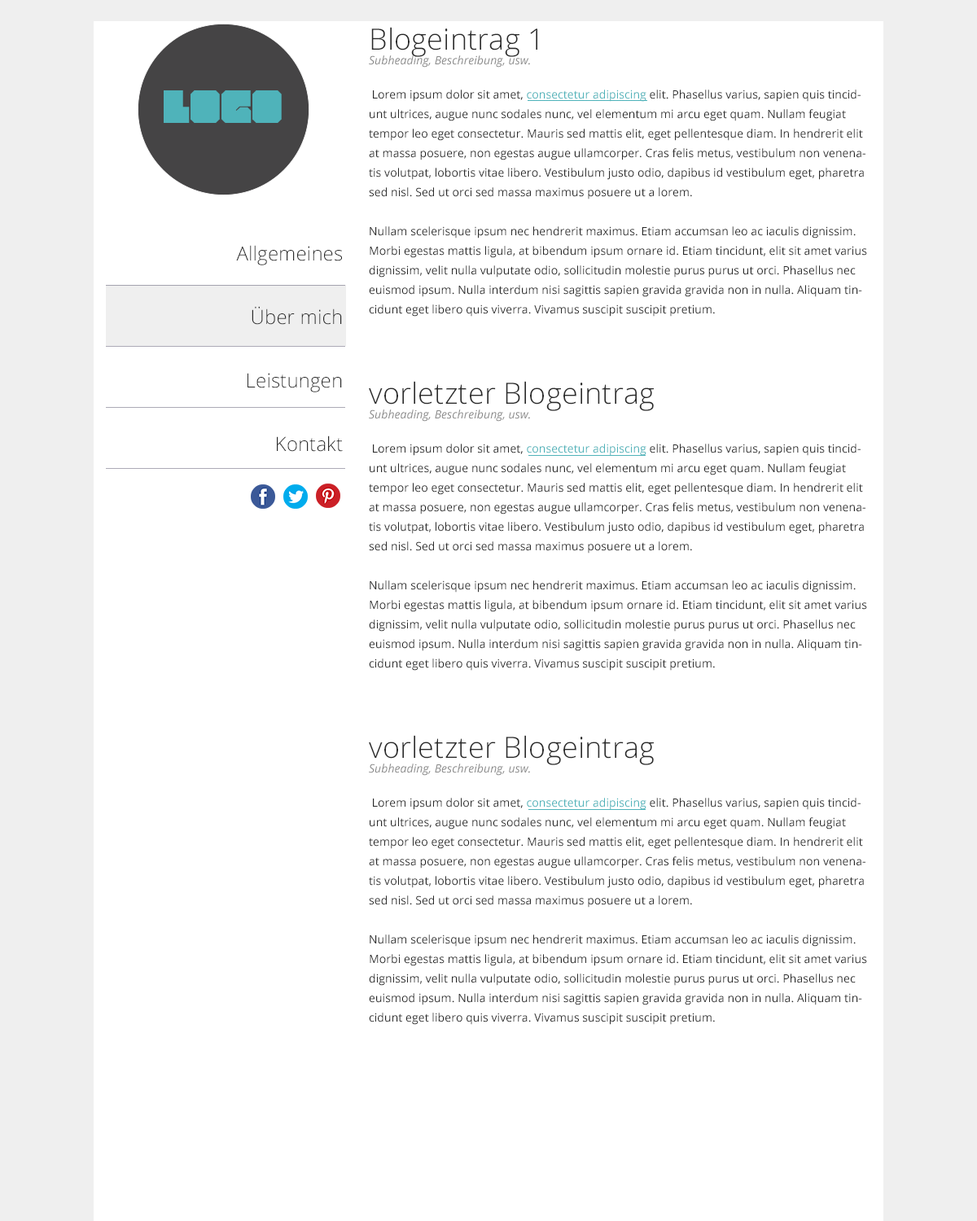
<style>
.page{position:relative;width:977px;height:1221px;background:#ffffff}
.page>*{position:absolute;margin:0}
.t1{font:11.4px/19.5px "OpenSans";letter-spacing:0.005em;color:#2a2a2a}
.t2{font:29.3px/14.7px "OpenSans-Light";letter-spacing:0.005em;color:#2a2a2a}
.t3{font:11.4px/14.7px "OpenSans-Italic";letter-spacing:0.005em;color:#8a8a8a}
.t4{font:11.4px/19.5px "OpenSans";letter-spacing:0.005em;color:#4fb3ba}
.t5{font:19.5px/48.8px "OpenSans-Light";letter-spacing:0.005em;color:#2a2a2a}
</style>
<div class="page">
<p class="t1" style="left:369px;top:27px;width:498px;height:290px"><span class="t2">Blogeintrag 1<br></span><span class="t3">Subheading, Beschreibung, usw.<br><br> </span>Lorem ipsum dolor sit amet, <span class="t4">consectetur adipiscing</span> elit. Phasellus varius, sapien quis tincidunt ultrices, augue nunc sodales nunc, vel elementum mi arcu eget quam. Nullam feugiat tempor leo eget consectetur. Mauris sed mattis elit, eget pellentesque diam. In hendrerit elit at massa posuere, non egestas augue ullamcorper. Cras felis metus, vestibulum non venenatis volutpat, lobortis vitae libero. Vestibulum justo odio, dapibus id vestibulum eget, pharetra sed nisl. Sed ut orci sed massa maximus posuere ut a lorem.<br><br>Nullam scelerisque ipsum nec hendrerit maximus. Etiam accumsan leo ac iaculis dignissim. Morbi egestas mattis ligula, at bibendum ipsum ornare id. Etiam tincidunt, elit sit amet varius dignissim, velit nulla vulputate odio, sollicitudin molestie purus purus ut orci. Phasellus nec euismod ipsum. Nulla interdum nisi sagittis sapien gravida gravida non in nulla. Aliquam tincidunt eget libero quis viverra. Vivamus suscipit suscipit pretium.</p>
<p class="t5" style="left:236px;top:245px;width:107px;height:207px;text-align:right">Allgemeines<br><br>Über mich<br><br>Leistungen<br><br>Kontakt</p>
<p class="t1" style="left:369px;top:381px;width:498px;height:290px"><span class="t2">vorletzter Blogeintrag<br></span><span class="t3">Subheading, Beschreibung, usw.<br><br> </span>Lorem ipsum dolor sit amet, <span class="t4">consectetur adipiscing</span> elit. Phasellus varius, sapien quis tincidunt ultrices, augue nunc sodales nunc, vel elementum mi arcu eget quam. Nullam feugiat tempor leo eget consectetur. Mauris sed mattis elit, eget pellentesque diam. In hendrerit elit at massa posuere, non egestas augue ullamcorper. Cras felis metus, vestibulum non venenatis volutpat, lobortis vitae libero. Vestibulum justo odio, dapibus id vestibulum eget, pharetra sed nisl. Sed ut orci sed massa maximus posuere ut a lorem.<br><br>Nullam scelerisque ipsum nec hendrerit maximus. Etiam accumsan leo ac iaculis dignissim. Morbi egestas mattis ligula, at bibendum ipsum ornare id. Etiam tincidunt, elit sit amet varius dignissim, velit nulla vulputate odio, sollicitudin molestie purus purus ut orci. Phasellus nec euismod ipsum. Nulla interdum nisi sagittis sapien gravida gravida non in nulla. Aliquam tincidunt eget libero quis viverra. Vivamus suscipit suscipit pretium.</p>
<p class="t1" style="left:369px;top:735px;width:498px;height:290px"><span class="t2">vorletzter Blogeintrag<br></span><span class="t3">Subheading, Beschreibung, usw.<br><br> </span>Lorem ipsum dolor sit amet, <span class="t4">consectetur adipiscing</span> elit. Phasellus varius, sapien quis tincidunt ultrices, augue nunc sodales nunc, vel elementum mi arcu eget quam. Nullam feugiat tempor leo eget consectetur. Mauris sed mattis elit, eget pellentesque diam. In hendrerit elit at massa posuere, non egestas augue ullamcorper. Cras felis metus, vestibulum non venenatis volutpat, lobortis vitae libero. Vestibulum justo odio, dapibus id vestibulum eget, pharetra sed nisl. Sed ut orci sed massa maximus posuere ut a lorem.<br><br>Nullam scelerisque ipsum nec hendrerit maximus. Etiam accumsan leo ac iaculis dignissim. Morbi egestas mattis ligula, at bibendum ipsum ornare id. Etiam tincidunt, elit sit amet varius dignissim, velit nulla vulputate odio, sollicitudin molestie purus purus ut orci. Phasellus nec euismod ipsum. Nulla interdum nisi sagittis sapien gravida gravida non in nulla. Aliquam tincidunt eget libero quis viverra. Vivamus suscipit suscipit pretium.</p>
</div>
